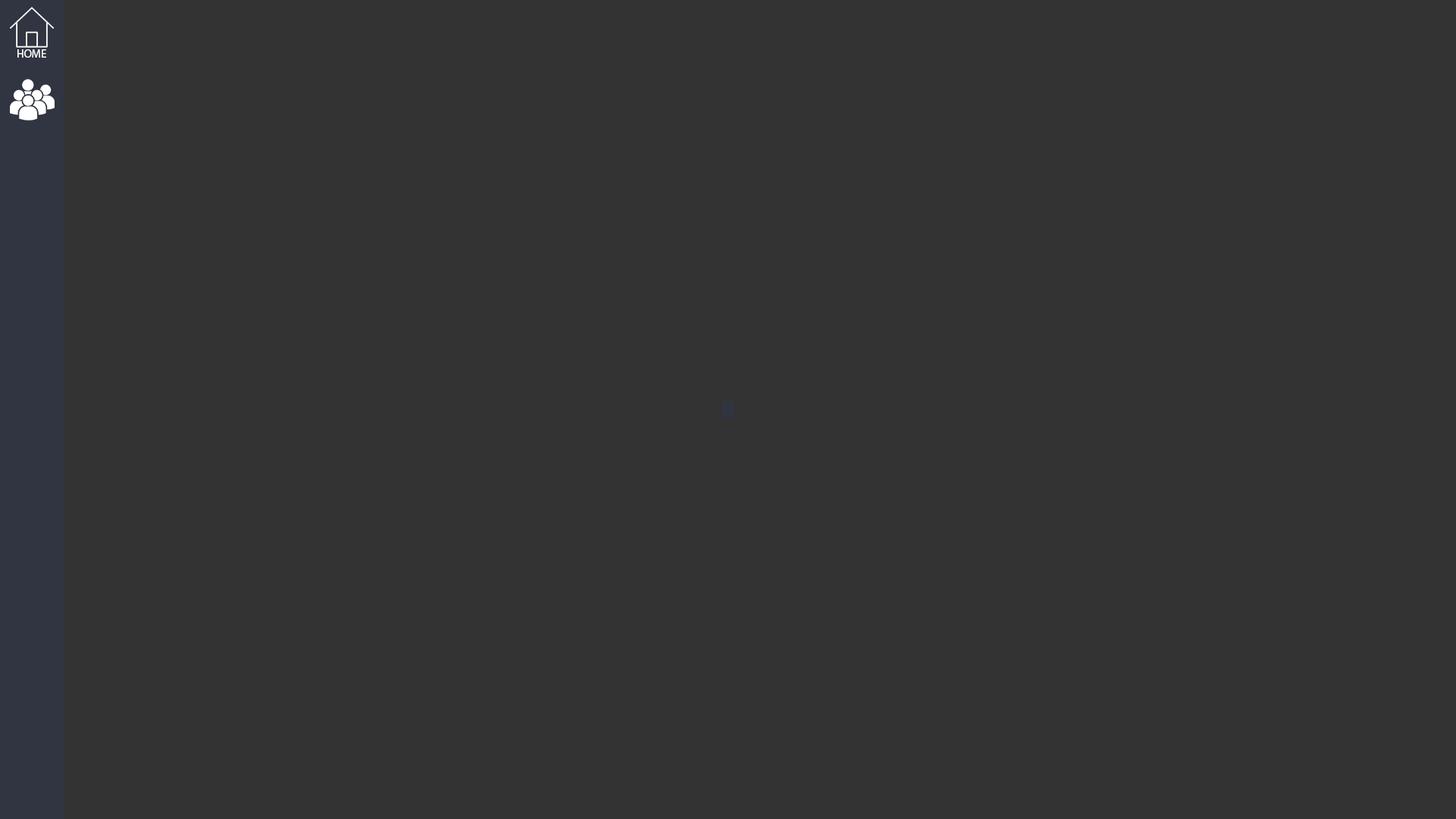
<style>
.page{position:relative;width:1456px;height:819px;background:#333333}
.page>*{position:absolute;margin:0}
.t1{font:11.4px "MyriadPro-Regular";color:#ffffff}
</style>
<div class="page">
<p class="t1" style="left:17px;top:49px;width:29px;height:9px">HOME</p>
</div>
